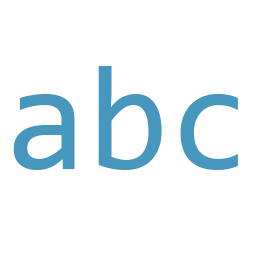
<style>
.page{position:relative;width:256px;height:256px;background:#ffffff}
.page>*{position:absolute;margin:0}
.t1{font:150px "Consolas";color:#4696bd}
</style>
<div class="page">
<p class="t1" style="left:13px;top:66px;width:225px;height:104px">abc</p>
</div>
